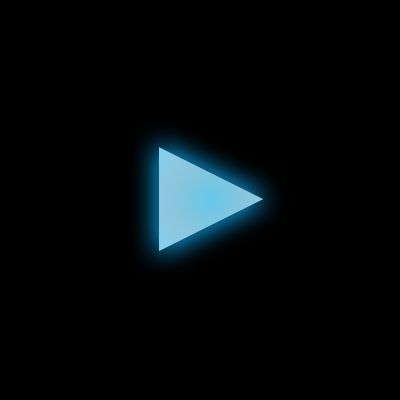
<style>
.page{position:relative;width:400px;height:400px;background:#000000}
.page>*{position:absolute;margin:0}
.t1{font:150.3px "TimesNewRomanPSMT";color:#80d1f5}
</style>
<div class="page">
<p class="t1" style="left:159px;top:147px;width:104px;height:104px;rotate:90deg">▲</p>
</div>
